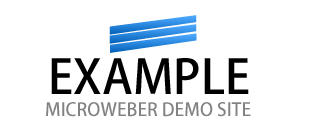
<style>
.page{position:relative;width:309px;height:125px;background:#ffffff}
.page>*{position:absolute;margin:0}
.t1{font:46.7px "KozGoPr6N-Medium";color:#000000}
.t2{font:18px "KozGoPr6N-Medium";color:#828282}
</style>
<div class="page">
<p class="t1" style="left:51px;top:58px;width:198px;height:36px">EXAMPLE</p>
<p class="t2" style="left:46px;top:102px;width:205px;height:15px">MICROWEBER DEMO SITE</p>
</div>
